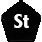
<style>
.page{position:relative;width:42px;height:42px;background:#020202}
.page>*{position:absolute;margin:0}
.t1{font:20px "AbadiMT-CondensedExtraBold";color:#ffffff}
</style>
<div class="page">
<p class="t1" style="left:14px;top:14px;width:15px;height:14px">St</p>
</div>
